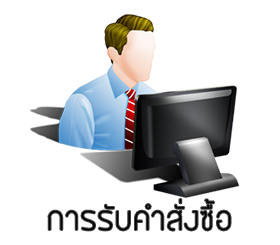
<style>
.page{position:relative;width:280px;height:245px;background:#ffffff}
.page>*{position:absolute;margin:0}
.t1{font:30px "BangnaNew";color:#020200}
</style>
<div class="page">
<p class="t1" style="left:48px;top:199px;width:183px;height:32px">การรับคำสั่งซื้อ</p>
</div>
